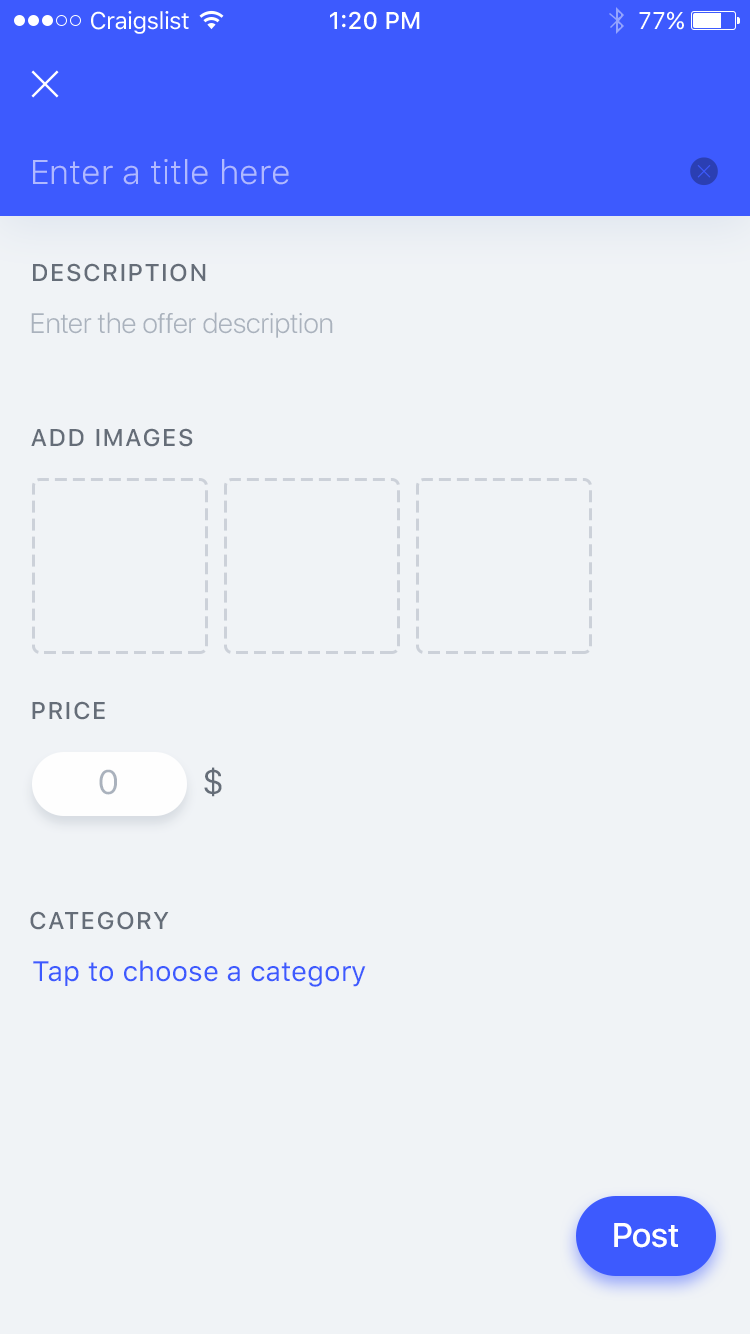
<style>
.page{position:relative;width:750px;height:1334px;background:#f0f3f6}
.page>*{position:absolute;margin:0}
.t1{font:24px "SFUIText-Regular";letter-spacing:-0.025em;color:#ffffff}
.t2{font:24px "SFUIText-Medium";color:#ffffff}
.t3{font:24px "SFUIText-Regular";color:#ffffff}
.t4{font:34px "SFUIText-Light";color:#b0b9ff}
.t5{font:24px "SFUIDisplay-Medium";letter-spacing:0.1em;color:#656d78;text-transform:uppercase}
.t6{font:28px "SFUIDisplay-Light";color:#aab2bd}
.t7{font:34px "SFUIDisplay-Regular";color:#aab2bd}
.t8{font:34px "SFUIText-Regular";color:#656d78}
.t9{font:28px "SFUIText-Regular";color:#3d5afe}
.t10{font:34px "SFUIDisplay-Medium";color:#ffffff}
</style>
<div class="page">
<p class="t1" style="left:91px;top:11px;width:98px;height:23px">Craigslist</p>
<p class="t2" style="left:330px;top:11px;width:90px;height:19px">1:20 PM</p>
<p class="t3" style="left:639px;top:11px;width:45px;height:19px">77%</p>
<p class="t4" style="left:33px;top:159px;width:256px;height:26px">Enter a title here</p>
<p class="t5" style="left:33px;top:263px;width:173px;height:19px">Description</p>
<p class="t6" style="left:31px;top:312px;width:302px;height:26px">Enter the offer description</p>
<p class="t5" style="left:31px;top:428px;width:162px;height:19px">Add images</p>
<p class="t5" style="left:32px;top:701px;width:73px;height:19px">Price</p>
<p class="t7" style="left:99px;top:769px;width:18px;height:26px">0</p>
<p class="t8" style="left:204px;top:767px;width:18px;height:30px">$</p>
<p class="t5" style="left:30px;top:911px;width:139px;height:19px">Category</p>
<p class="t9" style="left:33px;top:960px;width:333px;height:27px">Tap to choose a category</p>
<p class="t10" style="left:614px;top:1223px;width:64px;height:25px">Post</p>
</div>
